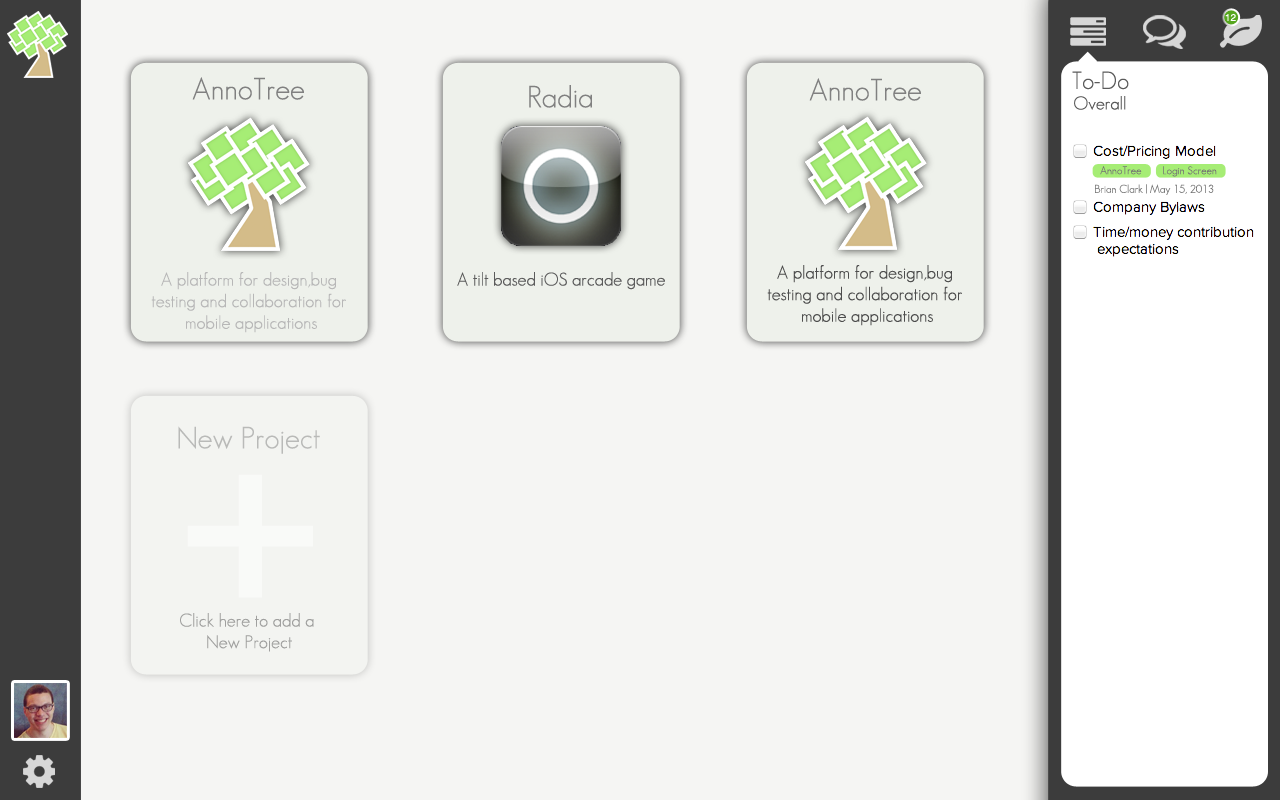
<style>
.page{position:relative;width:1280px;height:800px;background:#f5f5f3}
.page>*{position:absolute;margin:0}
.t1{font:10px "Helvetica";color:#ffffff}
.t2{font:30px "GeosansLight";color:#808080}
.t3{font:24px "GeosansLight";color:#5a5a5a}
.t4{font:18px "GeosansLight";color:#565656}
.t5{font:11px "GeosansLight";color:#747474}
.t6{font:18px "GeosansLight";color:#4d4d4d}
.t7{font:18px "GeosansLight";color:#b7b7b7}
.t8{font:18px "GeosansLight";color:#5b5b5b}
.t9{font:30px "GeosansLight";color:#b9bab8}
.t10{font:500px "GeosansLight";color:#ffffff}
.t11{font:18px "GeosansLight";color:#a0a09f}
</style>
<div class="page">
<p class="t1" style="left:1225px;top:13px;width:11px;height:8px">12</p>
<p class="t2" style="left:192px;top:77px;width:112px;height:23px">AnnoTree</p>
<p class="t2" style="left:809px;top:78px;width:112px;height:23px">AnnoTree</p>
<p class="t3" style="left:1072px;top:71px;width:57px;height:19px">To-Do</p>
<p class="t2" style="left:529px;top:85px;width:63px;height:23px">Radia</p>
<p class="t4" style="left:1074px;top:96px;width:52px;height:14px">Overall</p>
<p class="t5" style="left:1100px;top:166px;width:42px;height:9px">AnnoTree</p>
<p class="t5" style="left:1163px;top:166px;width:54px;height:11px">Login Screen</p>
<p class="t5" style="left:1095px;top:184px;width:119px;height:11px">Brian Clark | May 15, 2013</p>
<p class="t6" style="left:767px;top:265px;width:195px;height:61px;text-align:center">A platform for design,bug <br>testing and collaboration for <br>mobile applications</p>
<p class="t7" style="left:151px;top:272px;width:195px;height:61px;text-align:center">A platform for design,bug <br>testing and collaboration for <br>mobile applications</p>
<p class="t8" style="left:457px;top:272px;width:208px;height:18px">A tilt based iOS arcade game</p>
<p class="t9" style="left:178px;top:426px;width:142px;height:28px">New Project</p>
<p class="t10" style="left:187px;top:474px;width:126px;height:124px;opacity:0.5">+</p>
<p class="t11" style="left:180px;top:613px;width:134px;height:39px;text-align:center">Click here to add a <br>New Project</p>
</div>
